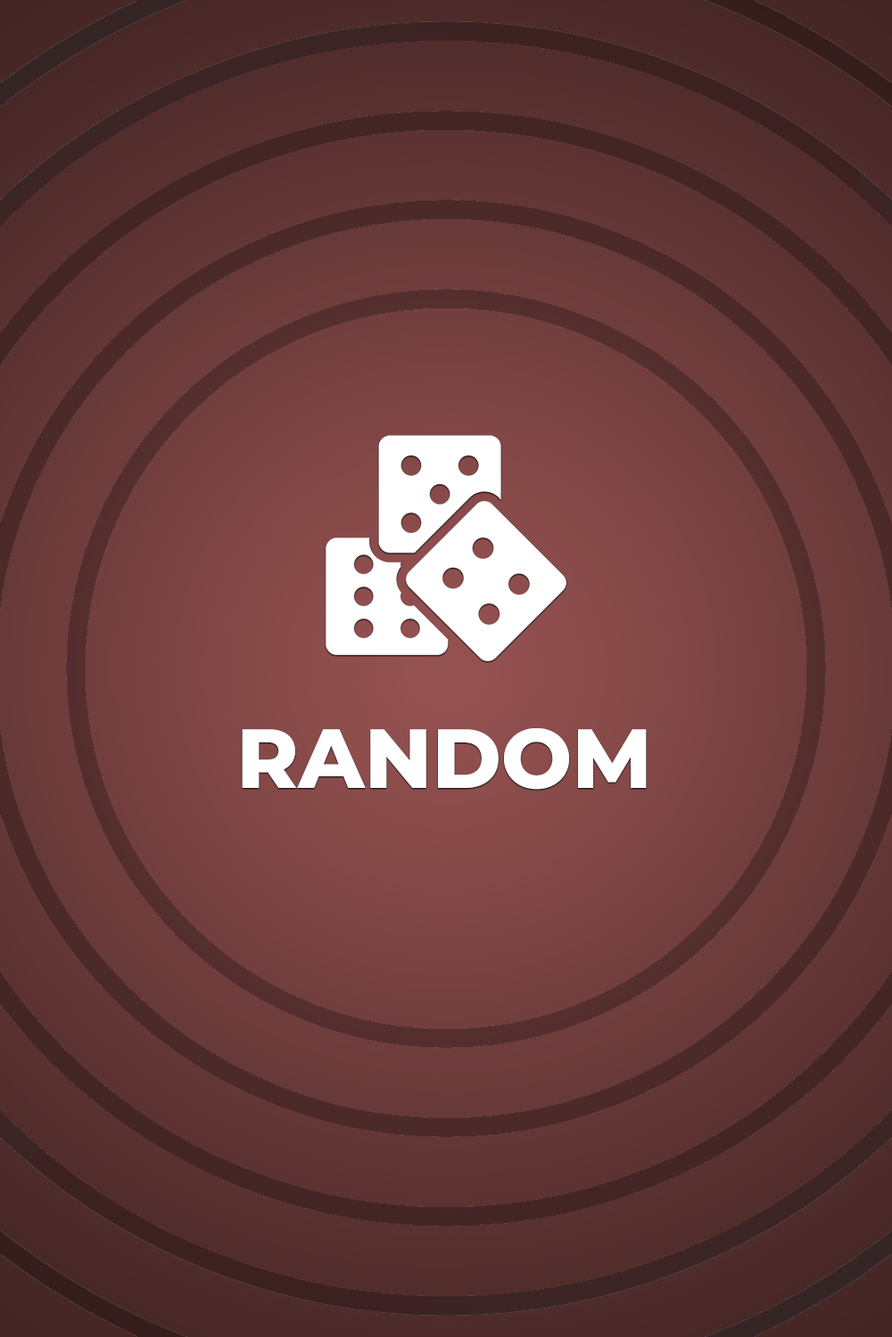
<style>
.page{position:relative;width:892px;height:1337px}
.page>*{position:absolute;margin:0}
.t1{font:83.8px "MontserratRoman-ExtraBold";color:#ffffff}
</style>
<div class="page">
<p class="t1" style="left:242px;top:728px;width:404px;height:62px">RANDOM</p>
</div>
